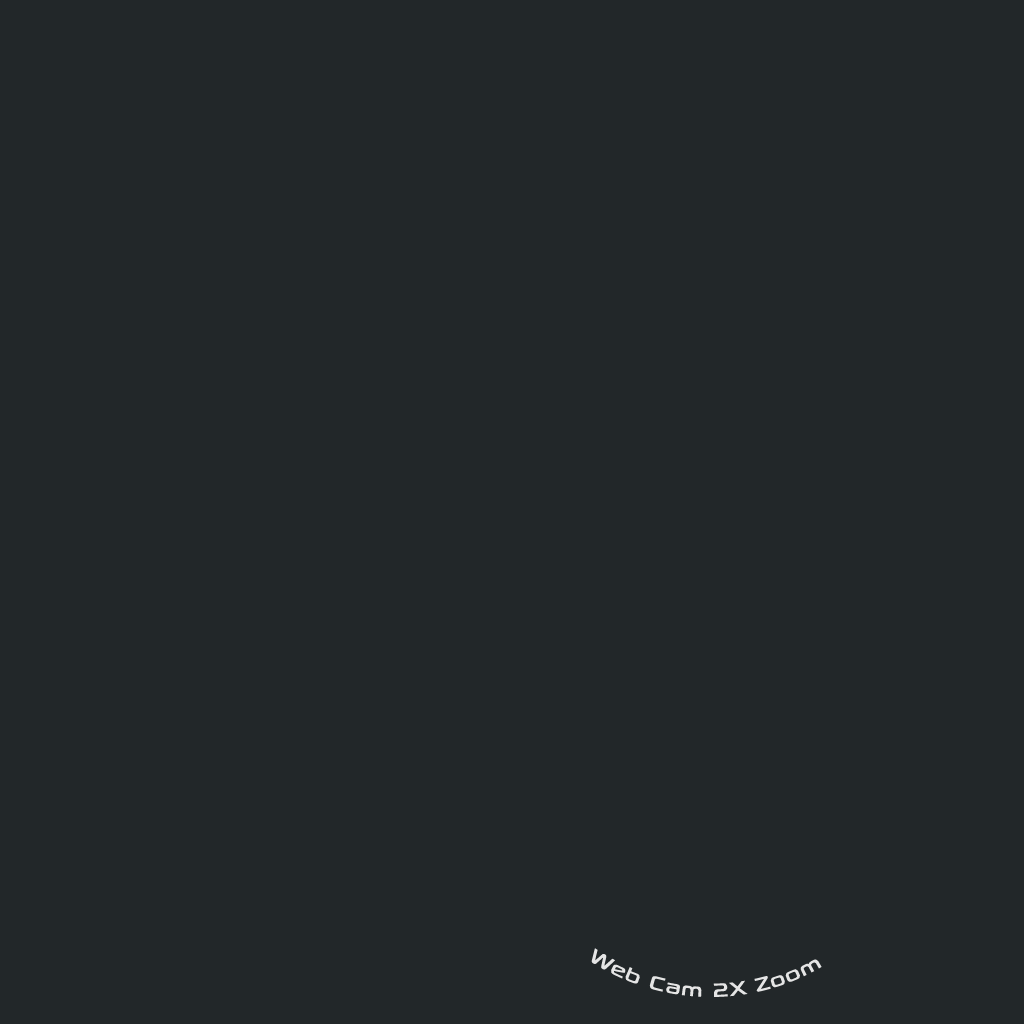
<style>
.page{position:relative;width:1024px;height:1024px;background:#222729}
.page>*{position:absolute;margin:0}
.t1{font:26.9px "SonySketchEF";color:#e5e5e5}
</style>
<div class="page">
<p class="t1" style="left:591px;top:948px;width:231px;height:49px;rotate:2deg">Web Cam 2X Zoom</p>
<p class="t1" style="left:591px;top:948px;width:231px;height:49px;rotate:2deg">Web Cam 2X Zoom</p>
</div>
